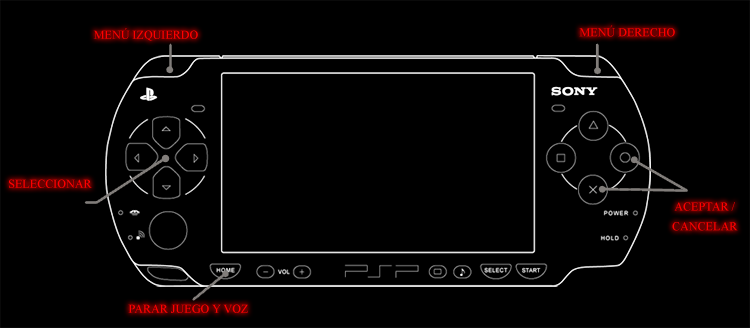
<style>
.page{position:relative;width:750px;height:328px;background:#000000}
.page>*{position:absolute;margin:0}
.t1{font:12.1px "IskoolaPota";color:#ff0000}
.t2{font:12.1px/19.7px "IskoolaPota";color:#ff0000}
</style>
<div class="page">
<p class="t1" style="left:93px;top:28px;width:105px;height:13px">MENÚ IZQUIERDO</p>
<p class="t1" style="left:579px;top:25px;width:96px;height:12px">MENÚ DERECHO</p>
<p class="t1" style="left:9px;top:179px;width:83px;height:9px">SELECCIONAR</p>
<p class="t2" style="left:672px;top:202px;width:66px;height:29px;text-align:center">ACEPTAR /<br>CANCELAR</p>
<p class="t1" style="left:128px;top:304px;width:120px;height:9px">PARAR JUEGO Y VOZ</p>
</div>
